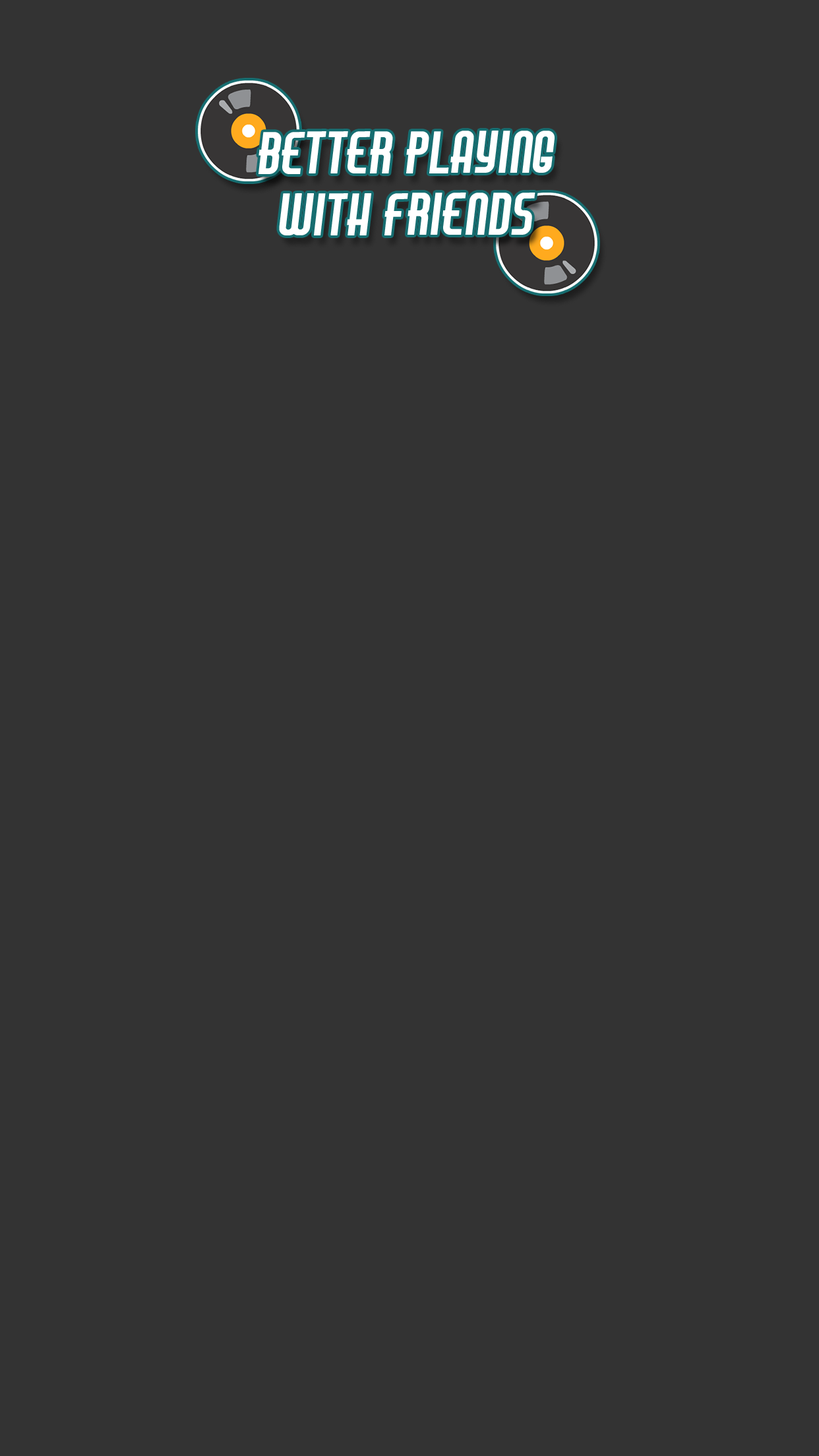
<style>
.page{position:relative;width:819px;height:1456px;background:#333333}
.page>*{position:absolute;margin:0}
.t1{font:51.5px "AirAmericana";color:#ffffff;font-weight:bold}
</style>
<div class="page">
<p class="t1" style="left:258px;top:131px;width:297px;height:104px;text-align:center">better playing<br>with friends</p>
</div>
